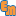
<style>
.page{position:relative;width:16px;height:16px;background:#f79838}
.page>*{position:absolute;margin:0}
.t1{font:15px "Bauhaus93";letter-spacing:0.05em;color:#f79838}
.t2{font:13px "Bauhaus93";letter-spacing:0.05em;color:#f79838}
</style>
<div class="page">
<p class="t1" style="left:1px;top:1px;width:6px;height:10px">E</p>
<p class="t2" style="left:6px;top:6px;width:10px;height:9px">M</p>
</div>
